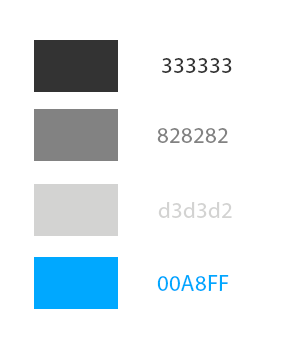
<style>
.page{position:relative;width:300px;height:346px;background:#ffffff}
.page>*{position:absolute;margin:0}
.t1{font:22.6px "MyriadPro-Regular";color:#333333}
.t2{font:22.6px "MyriadPro-Regular";color:#828282}
.t3{font:22.6px "MyriadPro-Regular";color:#d3d3d2}
.t4{font:22.6px "MyriadPro-Regular";color:#00a8ff;text-transform:uppercase}
</style>
<div class="page">
<p class="t1" style="left:162px;top:58px;width:70px;height:15px">333333</p>
<p class="t2" style="left:157px;top:128px;width:71px;height:15px">828282</p>
<p class="t3" style="left:158px;top:202px;width:74px;height:16px">d3d3d2</p>
<p class="t4" style="left:157px;top:275px;width:72px;height:16px">00a8ff</p>
</div>
